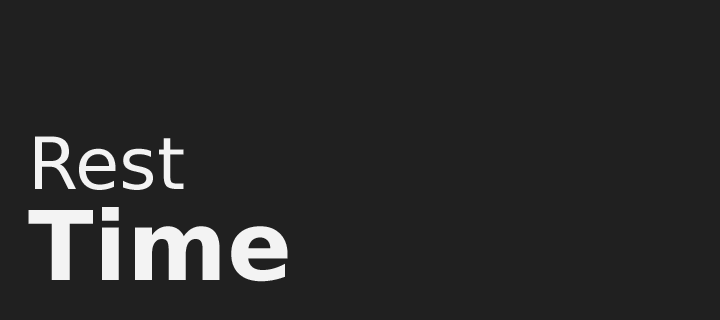
<style>
.page{position:relative;width:720px;height:320px;background:#202020}
.page>*{position:absolute;margin:0}
.t1{font:72px "DejaVuSans";color:#f3f3f3}
.t2{font:96px "DejaVuSans-Bold";color:#f3f3f3}
</style>
<div class="page">
<p class="t1" style="left:35px;top:136px;width:149px;height:54px">Rest</p>
<p class="t2" style="left:28px;top:207px;width:260px;height:75px">Time</p>
</div>
